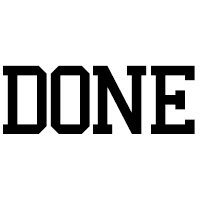
<style>
.page{position:relative;width:200px;height:200px;background:#ffffff}
.page>*{position:absolute;margin:0}
.t1{font:99.7px "College";letter-spacing:-0.06em;color:#000000}
</style>
<div class="page">
<p class="t1" style="left:3px;top:65px;width:192px;height:69px">DONE</p>
</div>
